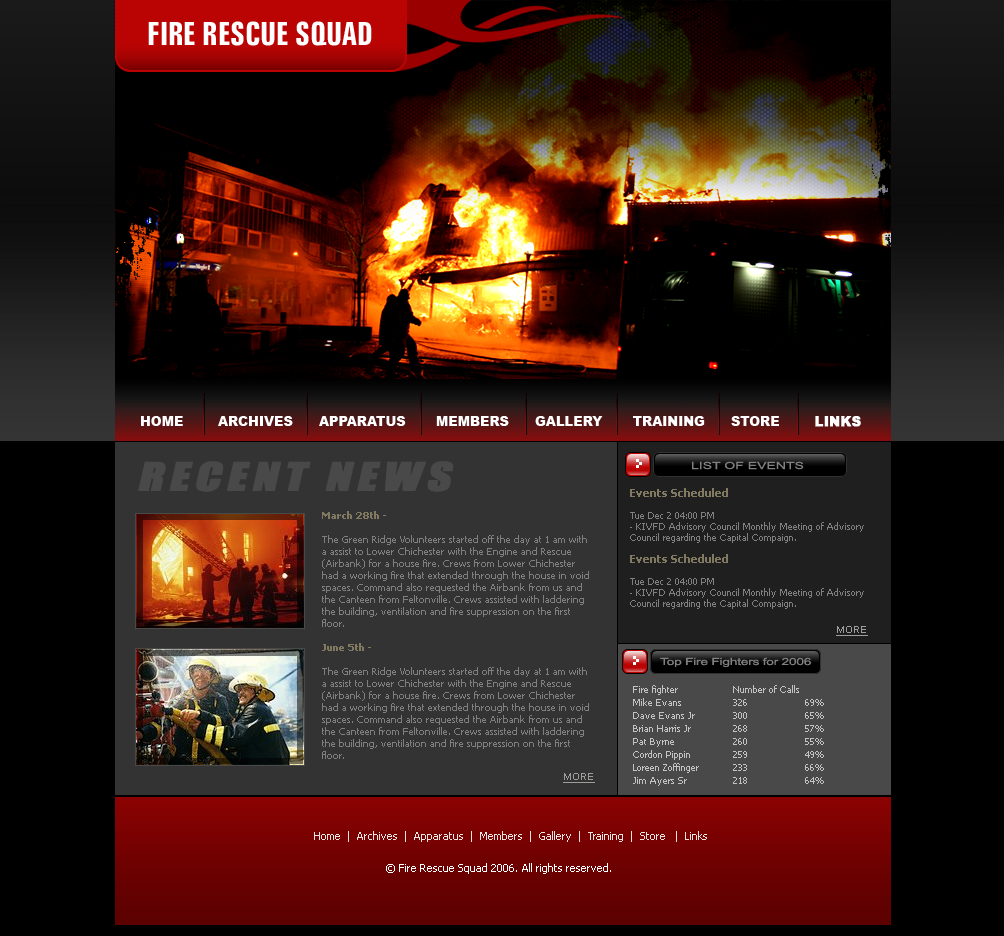
<style>
.page{position:relative;width:1004px;height:936px;background:#000000}
.page>*{position:absolute;margin:0}
.t1{font:32px "ZurichBT-BoldExtraCondensed";color:#ffffff;text-transform:uppercase}
.t2{font:13px "Arial-Black";color:#ffffff;text-transform:uppercase}
.t3{font:13px "Arial-Black";color:#ffffff;text-transform:uppercase;font-weight:bold}
.t4{font:36px "Impact";letter-spacing:0.1em;color:#494949;text-transform:uppercase;font-weight:bold;font-style:italic;scale:1.3 1}
.t5{font:9.8px "ArialMT";letter-spacing:-0.025em;color:#808080;text-transform:uppercase;font-weight:bold;scale:1.43 1}
.t6{font:9px/11px "Tahoma";color:#7f7f7f}
.t7{font:11px/11px "Tahoma-Bold";color:#827961}
.t8{font:10px "Tahoma";color:#7f7f7f}
.t9{font:10px "Tahoma-Bold";color:#827961}
.t10{font:10px "Arial-BoldMT";color:#9d9d9b;text-transform:uppercase;text-decoration:underline}
.t11{font:9.8px "ArialMT";letter-spacing:-0.025em;color:#808080;scale:1.43 1}
.t12{font:9px/13px "Tahoma";color:#c3c3c3}
.t13{font:11px "Tahoma";color:#e9e4e4}
.t14{font:11px "Tahoma";color:#ffffff}
</style>
<div class="page">
<p class="t1" style="left:148px;top:21px;width:224px;height:25px">Fire Rescue Squad</p>
<p class="t2" style="left:141px;top:416px;width:720px;height:11px">home        archives      apparatus       members      gallery       training      store       <span class="t3"> links</span></p>
<p class="t4" style="left:138px;top:461px;width:316px;height:31px">Recent News</p>
<p class="t5" style="left:692px;top:461px;width:112px;height:9px">List of Events</p>
<p class="t6" style="left:630px;top:488px;width:234px;height:121px"><span class="t7">Events Scheduled<br><br></span>Tue Dec 2 04:00 PM<br>- KIVFD Advisory Council Monthly Meeting of Advisory Council regarding the Capital Compaign.<br><br><span class="t7">Events Scheduled<br><br></span>Tue Dec 2 04:00 PM<br>- KIVFD Advisory Council Monthly Meeting of Advisory Council regarding the Capital Compaign.</p>
<p class="t8" style="left:322px;top:511px;width:267px;height:116px"><span class="t9">March 28th - <br><br></span>The Green Ridge Volunteers started off the day at 1 am with a assist to Lower Chichester with the Engine and Rescue (Airbank) for a house fire. Crews from Lower Chichester had a working fire that extended through the house in void spaces. Command also requested the Airbank from us and the Canteen from Feltonville. Crews assisted with laddering the building, ventilation and fire suppression on the first floor.</p>
<p class="t10" style="left:836px;top:626px;width:32px;height:10px">more</p>
<p class="t8" style="left:322px;top:643px;width:267px;height:116px"><span class="t9">June 5th - <br><br></span>The Green Ridge Volunteers started off the day at 1 am with a assist to Lower Chichester with the Engine and Rescue (Airbank) for a house fire. Crews from Lower Chichester had a working fire that extended through the house in void spaces. Command also requested the Airbank from us and the Canteen from Feltonville. Crews assisted with laddering the building, ventilation and fire suppression on the first floor.</p>
<p class="t11" style="left:660px;top:657px;width:151px;height:11px">Top Fire Fighters for 2006</p>
<p class="t12" style="left:633px;top:685px;width:66px;height:101px">Fire fighter<br>Mike Evans<br>Dave Evans Jr<br>Brian Harris Jr<br>Pat Byrne<br>Cordon Pippin<br>Loreen Zoffinger<br>Jim Ayers Sr</p>
<p class="t12" style="left:733px;top:685px;width:91px;height:99px">Number of Calls<br>326                   69%<br>300                   65%<br>268                   57%<br>260                   55%<br>259                   49%<br>233                   66%<br>218                   64%</p>
<p class="t10" style="left:563px;top:773px;width:32px;height:10px">more</p>
<p class="t13" style="left:314px;top:831px;width:393px;height:11px">Home  |  Archives  |  Apparatus  |  Members  |  Gallery  |  Training  |  Store   |  Links</p>
<p class="t14" style="left:386px;top:863px;width:225px;height:11px">© Fire Rescue Squad 2006. All rights reserved.</p>
</div>
